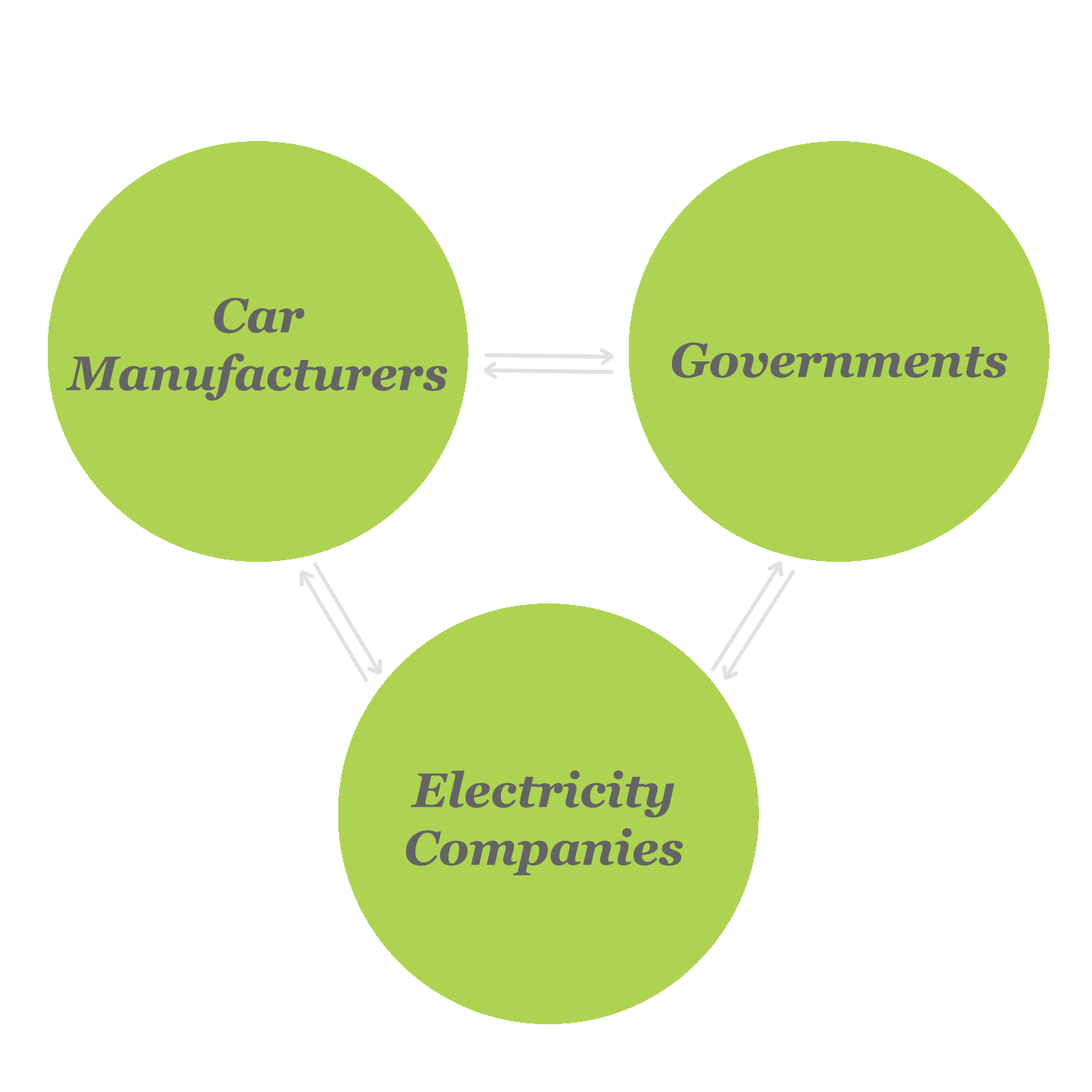
<style>
.page{position:relative;width:1092px;height:1092px;background:#ffffff}
.page>*{position:absolute;margin:0}
.t1{font:48.2px "Georgia-BoldItalic";color:#646464}
</style>
<div class="page">
<p class="t1" style="left:66px;top:297px;width:382px;height:104px;text-align:center">Car <br>Manufacturers</p>
<p class="t1" style="left:672px;top:342px;width:335px;height:36px">Governments</p>
<p class="t1" style="left:405px;top:770px;width:278px;height:105px;text-align:center">Electricity <br>Companies</p>
</div>
